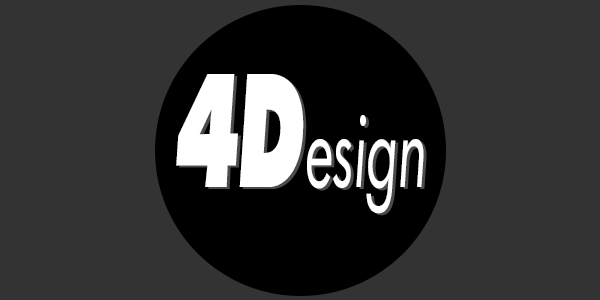
<style>
.page{position:relative;width:600px;height:300px;background:#333333}
.page>*{position:absolute;margin:0}
.t1{font:100px "FuturaNowHeadline-Italic";color:#ffffff;scale:0.54 1}
.t2{font:150px "FuturaNowHeadline-XBlkIt";color:#ffffff;scale:0.54 1}
</style>
<div class="page">
<p class="t1" style="left:176px;top:74px;width:248px;height:140px"><span class="t2">4D</span>esign</p>
</div>
